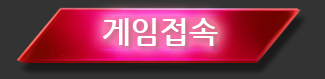
<style>
.page{position:relative;width:325px;height:79px;background:#333333}
.page>*{position:absolute;margin:0}
.t1{font:31px "NanumGothicBold";color:#ffffff}
</style>
<div class="page">
<p class="t1" style="left:103px;top:18px;width:115px;height:28px">게임접속</p>
</div>
